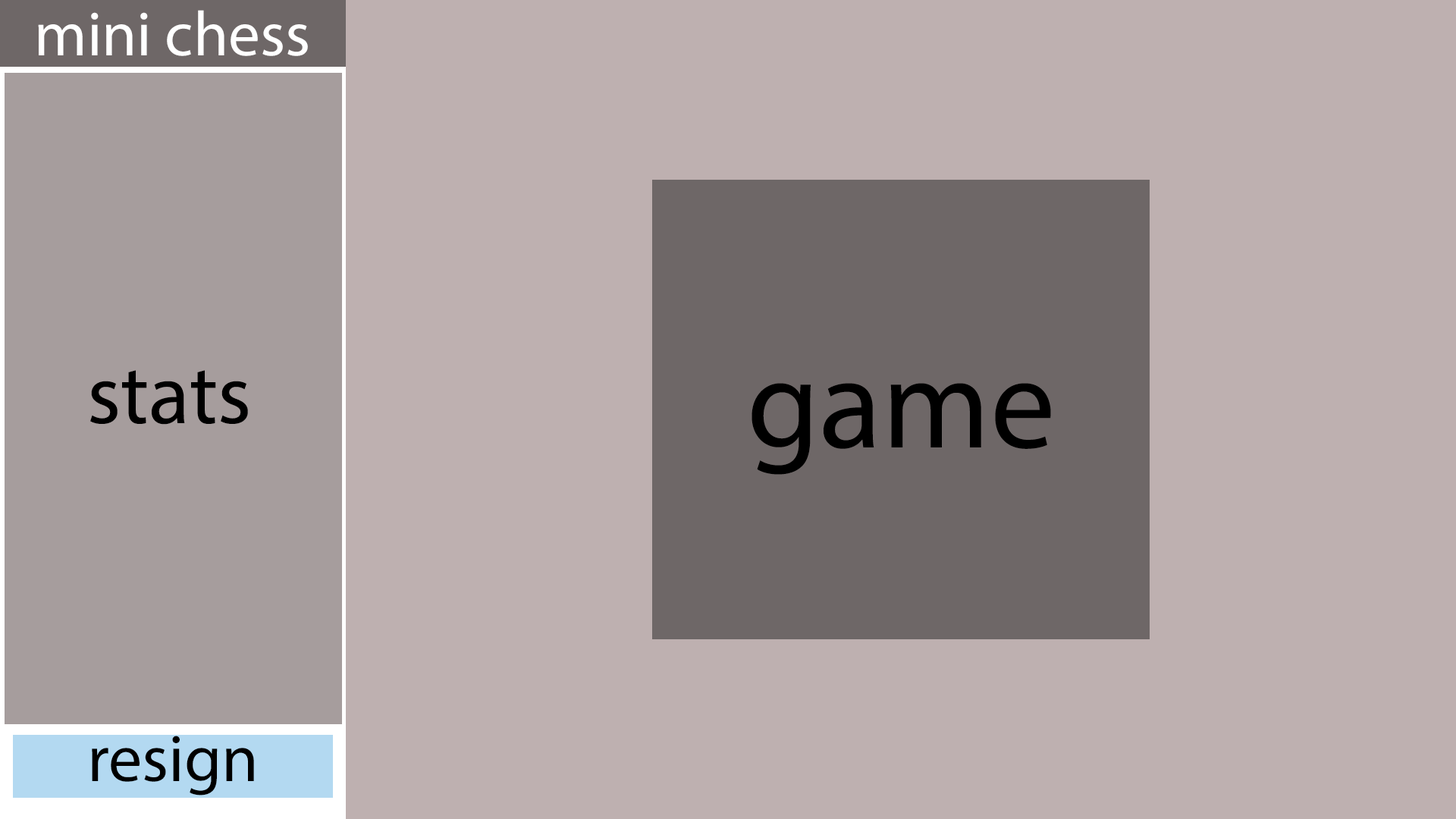
<style>
.page{position:relative;width:1456px;height:819px;background:#beb0b0}
.page>*{position:absolute;margin:0}
.t1{font:63.2px "MyriadPro-Regular";color:#ffffff}
.t2{font:84.7px "MyriadPro-Regular";color:#000000}
.t3{font:129.7px "MyriadPro-Regular";color:#000000}
.t4{font:66.9px "MyriadPro-Regular";color:#000000}
</style>
<div class="page">
<p class="t1" style="left:38px;top:10px;width:270px;height:46px">mini chess</p>
<p class="t2" style="left:90px;top:370px;width:158px;height:55px">stats</p>
<p class="t3" style="left:751px;top:383px;width:300px;height:92px">game</p>
<p class="t4" style="left:92px;top:736px;width:162px;height:59px">resign</p>
</div>
